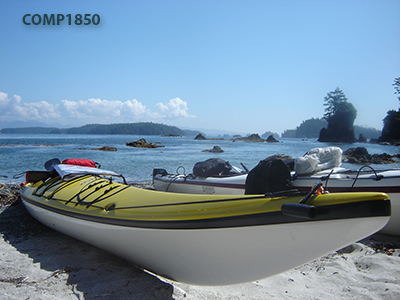
<style>
.page{position:relative;width:400px;height:300px}
.page>*{position:absolute;margin:0}
.t1{font:16px "MyriadPro-Bold";color:#234249}
</style>
<div class="page">
<p class="t1" style="left:22px;top:14px;width:78px;height:11px">COMP1850</p>
</div>
